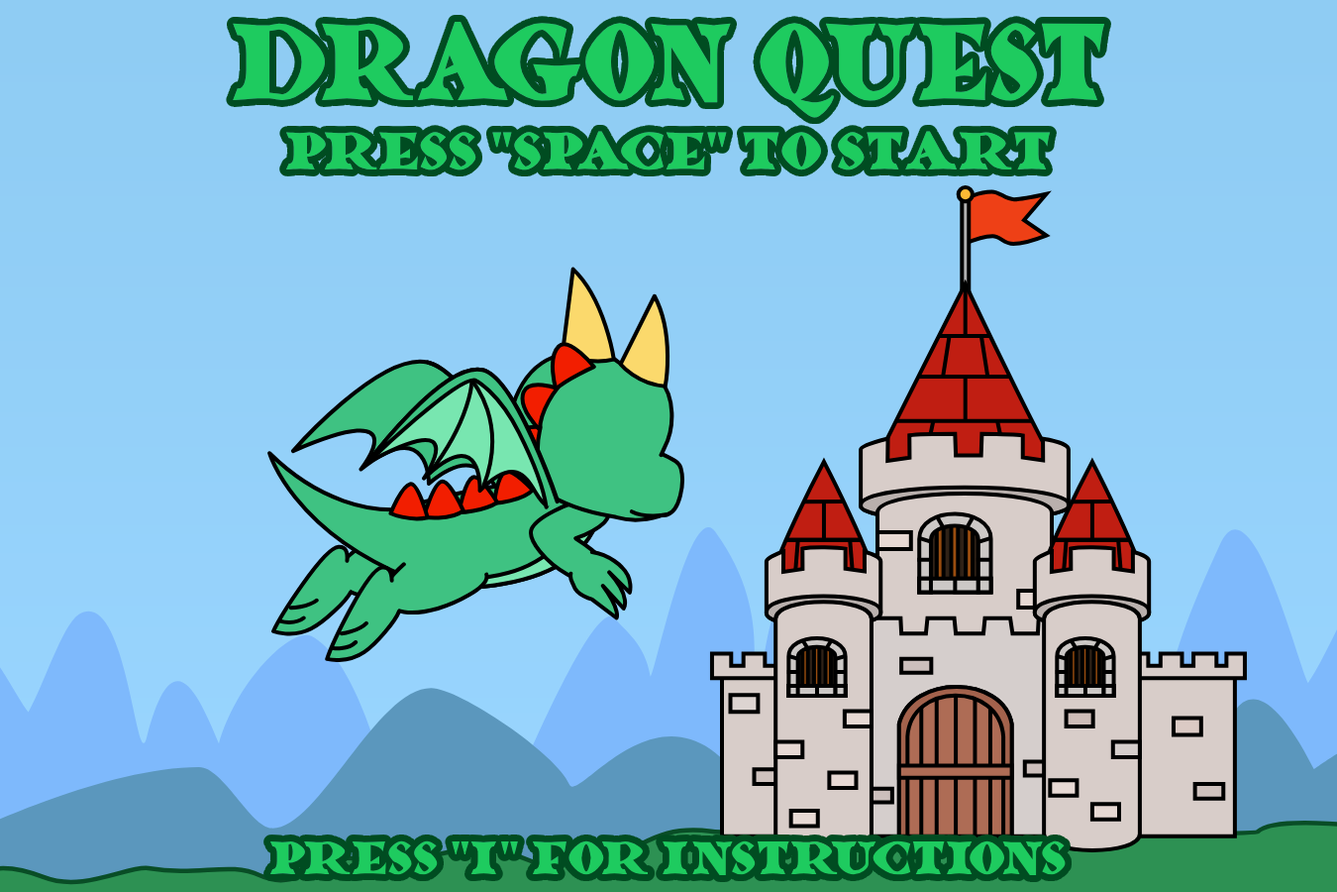
<style>
.page{position:relative;width:1337px;height:892px}
.page>*{position:absolute;margin:0}
.t1{font:118.7px "Dragonlands";color:#1ecb5f;scale:0.85 1}
.t2{font:57.7px "Dragonlands";color:#1ecb5f}
.t3{font:50.8px "Dragonlands";color:#1ecb5f}
</style>
<div class="page">
<p class="t1" style="left:233px;top:22px;width:873px;height:96px">Dragon Quest</p>
<p class="t2" style="left:285px;top:131px;width:766px;height:39px">Press "SPACE" To Start</p>
<p class="t3" style="left:270px;top:840px;width:796px;height:35px">Press "I" for instructions</p>
</div>
